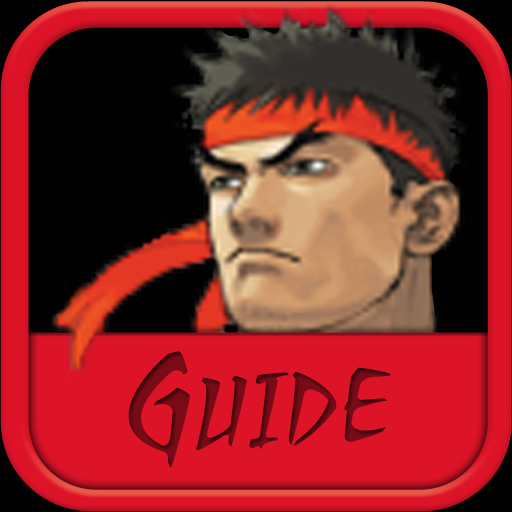
<style>
.page{position:relative;width:512px;height:512px;background:#dd1328}
.page>*{position:absolute;margin:0}
.t1{font:178.5px "RagingRedLotusBB-Italic";letter-spacing:-0.01em;font-variant:small-caps;font-weight:bold}
</style>
<div class="page">
<p class="t1" style="left:128px;top:351px;width:263px;height:117px;rotate:-3deg">Guide</p>
</div>
